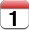
<style>
.page{position:relative;width:29px;height:30px;background:#ffffff}
.page>*{position:absolute;margin:0}
.t1{font:20px "Helvetica-Bold";color:#000000}
</style>
<div class="page">
<p class="t1" style="left:9px;top:11px;width:7px;height:15px">1</p>
</div>
